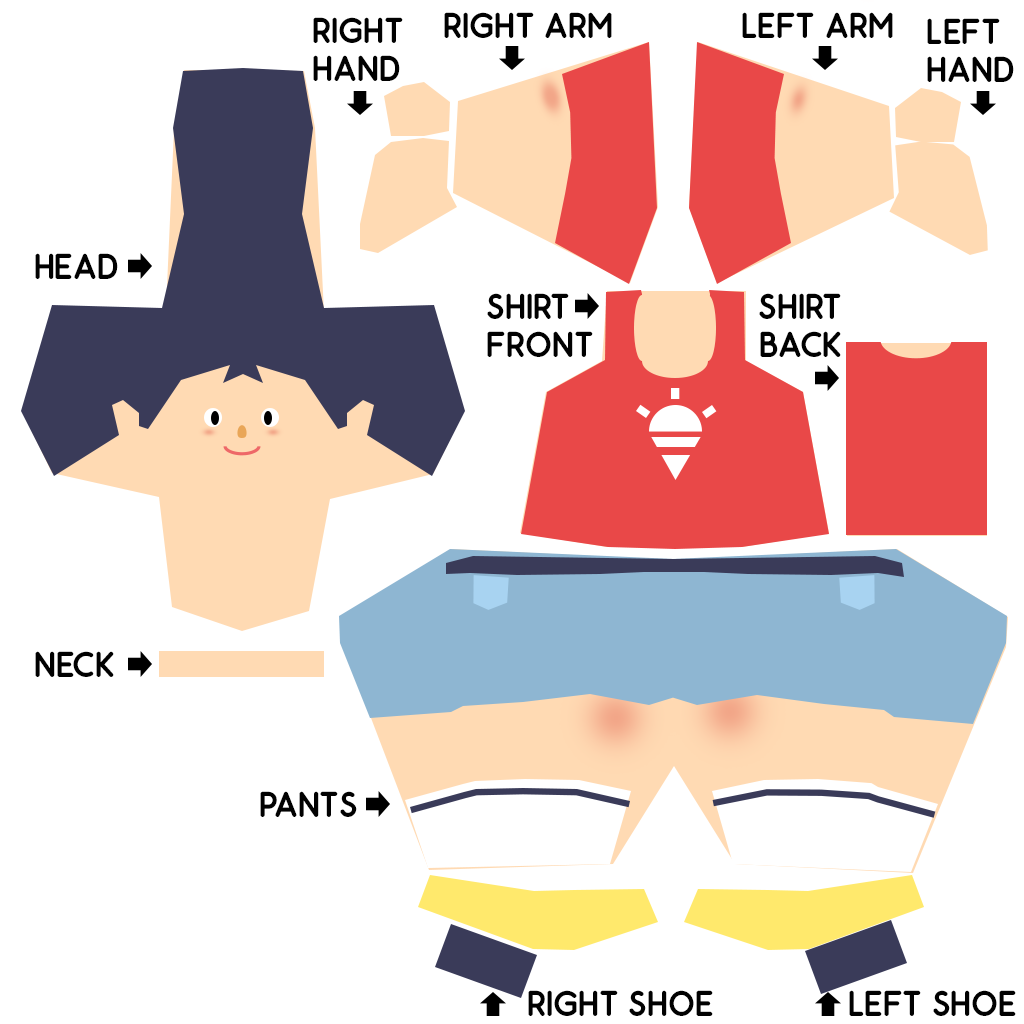
<style>
.page{position:relative;width:1024px;height:1024px;background:#ffffff}
.page>*{position:absolute;margin:0}
.t1{font:36px/38px "Odin-Bold";color:#010101}
.t2{font:36px "Odin-Bold";color:#010101}
</style>
<div class="page">
<p class="t1" style="left:313px;top:17px;width:90px;height:64px">RIGHT<br>HAND</p>
<p class="t2" style="left:444px;top:12px;width:168px;height:26px">RIGHT ARM</p>
<p class="t2" style="left:742px;top:12px;width:151px;height:26px">LEFT ARM</p>
<p class="t1" style="left:927px;top:18px;width:87px;height:64px">LEFT<br>HAND</p>
<p class="t2" style="left:35px;top:253px;width:83px;height:26px">HEAD</p>
<p class="t1" style="left:487px;top:293px;width:106px;height:64px">SHIRT<br>FRONT</p>
<p class="t1" style="left:759px;top:293px;width:82px;height:64px;text-align:center">SHIRT<br>BACK</p>
<p class="t2" style="left:35px;top:651px;width:79px;height:26px">NECK</p>
<p class="t2" style="left:260px;top:791px;width:97px;height:26px">PANTS</p>
<p class="t2" style="left:528px;top:990px;width:185px;height:26px">RIGHT SHOE</p>
<p class="t2" style="left:849px;top:990px;width:167px;height:26px">LEFT SHOE</p>
</div>
